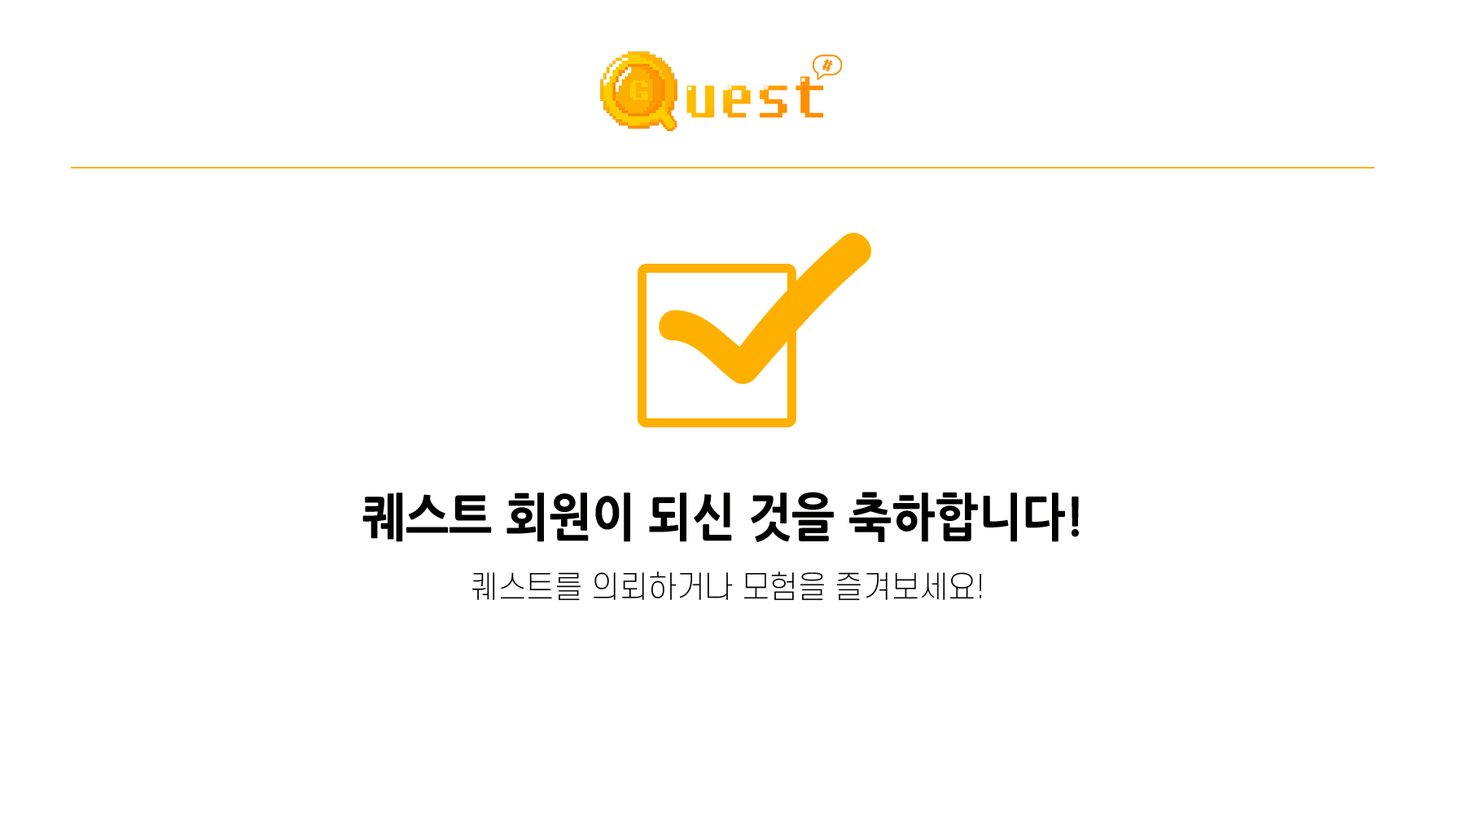
<style>
.page{position:relative;width:1464px;height:814px;background:#ffffff}
.page>*{position:absolute;margin:0}
.t1{font:50.8px "NanumGothicExtraBold";color:#010100;scale:0.91 1}
.t2{font:30.7px "S-CoreDream-2ExtraLight";color:#010100;scale:0.96 1}
</style>
<div class="page">
<p class="t1" style="left:362px;top:492px;width:717px;height:50px">퀘스트 회원이 되신 것을 축하합니다!</p>
<p class="t2" style="left:472px;top:572px;width:510px;height:29px">퀘스트를 의뢰하거나 모험을 즐겨보세요!</p>
</div>
